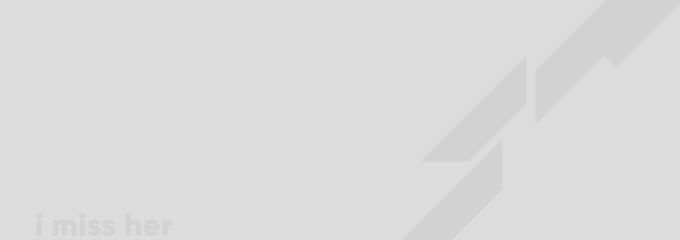
<style>
.page{position:relative;width:680px;height:240px;background:#dcdcdc}
.page>*{position:absolute;margin:0}
.t1{font:30.9px "Gilroy-Black";letter-spacing:0.02em;color:#d2d2d2}
</style>
<div class="page">
<p class="t1" style="left:36px;top:212px;width:137px;height:24px">i miss her</p>
</div>
